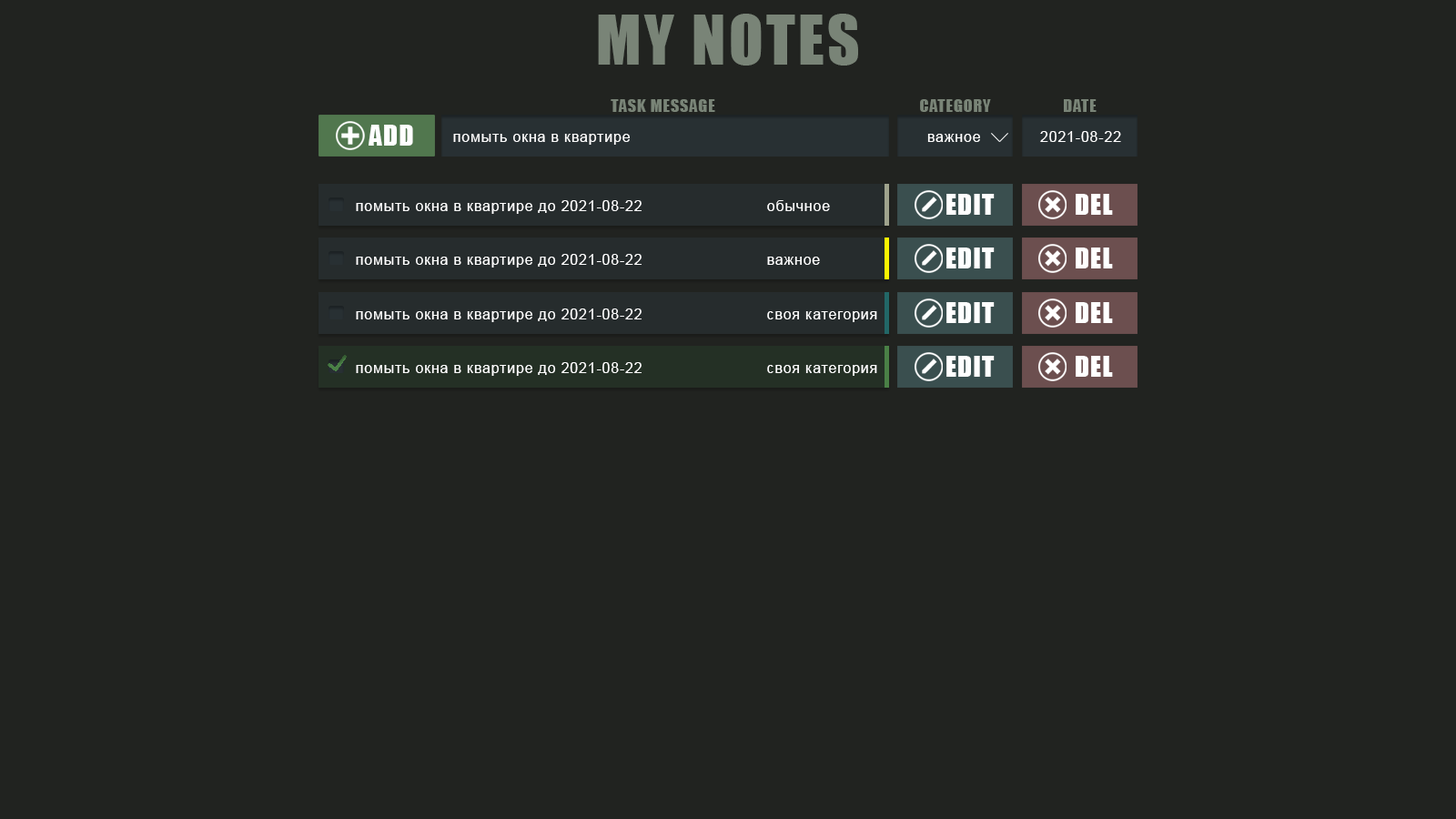
<style>
.page{position:relative;width:1456px;height:819px;background:#212320}
.page>*{position:absolute;margin:0}
.t1{font:62.8px "Impact";letter-spacing:0.05em;color:#798477}
.t2{font:16.4px "Impact";letter-spacing:0.05em;color:#798477}
.t3{font:26.2px "Impact";letter-spacing:0.05em;color:#ffffff}
.t4{font:14.6px "ArialMT";letter-spacing:0.05em;color:#ffffff}
</style>
<div class="page">
<p class="t1" style="left:598px;top:14px;width:260px;height:52px">MY NOTES</p>
<p class="t2" style="left:611px;top:99px;width:104px;height:13px">TASK MESSAGE</p>
<p class="t2" style="left:920px;top:99px;width:71px;height:13px">CATEGORY</p>
<p class="t2" style="left:1064px;top:99px;width:33px;height:13px">DATE</p>
<p class="t3" style="left:369px;top:125px;width:44px;height:21px">ADD</p>
<p class="t4" style="left:453px;top:134px;width:177px;height:11px">помыть окна в квартире</p>
<p class="t4" style="left:927px;top:134px;width:53px;height:8px">важное</p>
<p class="t4" style="left:1040px;top:131px;width:81px;height:11px">2021-08-22</p>
<p class="t3" style="left:946px;top:194px;width:49px;height:21px">EDIT</p>
<p class="t3" style="left:1076px;top:194px;width:37px;height:21px">DEL</p>
<p class="t4" style="left:356px;top:200px;width:286px;height:14px">помыть окна в квартире до 2021-08-22</p>
<p class="t4" style="left:767px;top:200px;width:63px;height:11px">обычное</p>
<p class="t4" style="left:356px;top:254px;width:286px;height:14px">помыть окна в квартире до 2021-08-22</p>
<p class="t4" style="left:767px;top:257px;width:53px;height:8px">важное</p>
<p class="t3" style="left:946px;top:248px;width:49px;height:20px">EDIT</p>
<p class="t3" style="left:1076px;top:248px;width:37px;height:20px">DEL</p>
<p class="t3" style="left:946px;top:302px;width:49px;height:21px">EDIT</p>
<p class="t3" style="left:1076px;top:302px;width:37px;height:21px">DEL</p>
<p class="t4" style="left:356px;top:308px;width:286px;height:14px">помыть окна в квартире до 2021-08-22</p>
<p class="t4" style="left:767px;top:311px;width:110px;height:11px">своя категория</p>
<p class="t4" style="left:356px;top:362px;width:286px;height:14px">помыть окна в квартире до 2021-08-22</p>
<p class="t4" style="left:767px;top:365px;width:110px;height:11px">своя категория</p>
<p class="t3" style="left:946px;top:356px;width:49px;height:21px">EDIT</p>
<p class="t3" style="left:1076px;top:356px;width:37px;height:21px">DEL</p>
</div>
